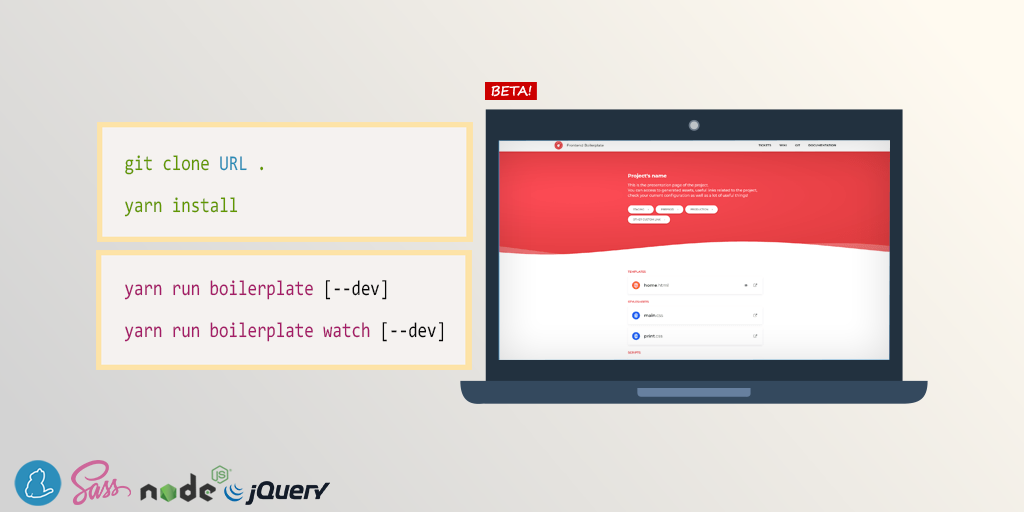
<style>
.page{position:relative;width:1024px;height:512px}
.page>*{position:absolute;margin:0}
.t1{font:21px/21px "Consolas";color:#629700;scale:0.82 1}
.t2{font:21px/21px "Consolas";color:#268bb6;scale:0.82 1}
.t3{font:21px/21px "Consolas";color:#a41b67;scale:0.82 1}
.t4{font:21px/21px "Consolas";color:#070707;scale:0.82 1}
</style>
<div class="page">
<p class="t1" style="left:124px;top:155px;width:140px;height:62px">git clone <span class="t2">URL </span>.<br><br>yarn install</p>
<p class="t3" style="left:124px;top:280px;width:320px;height:62px">yarn run boilerplate <span class="t4">[--dev]<br><br></span>yarn run boilerplate watch <span class="t4">[--dev]</span></p>
</div>
